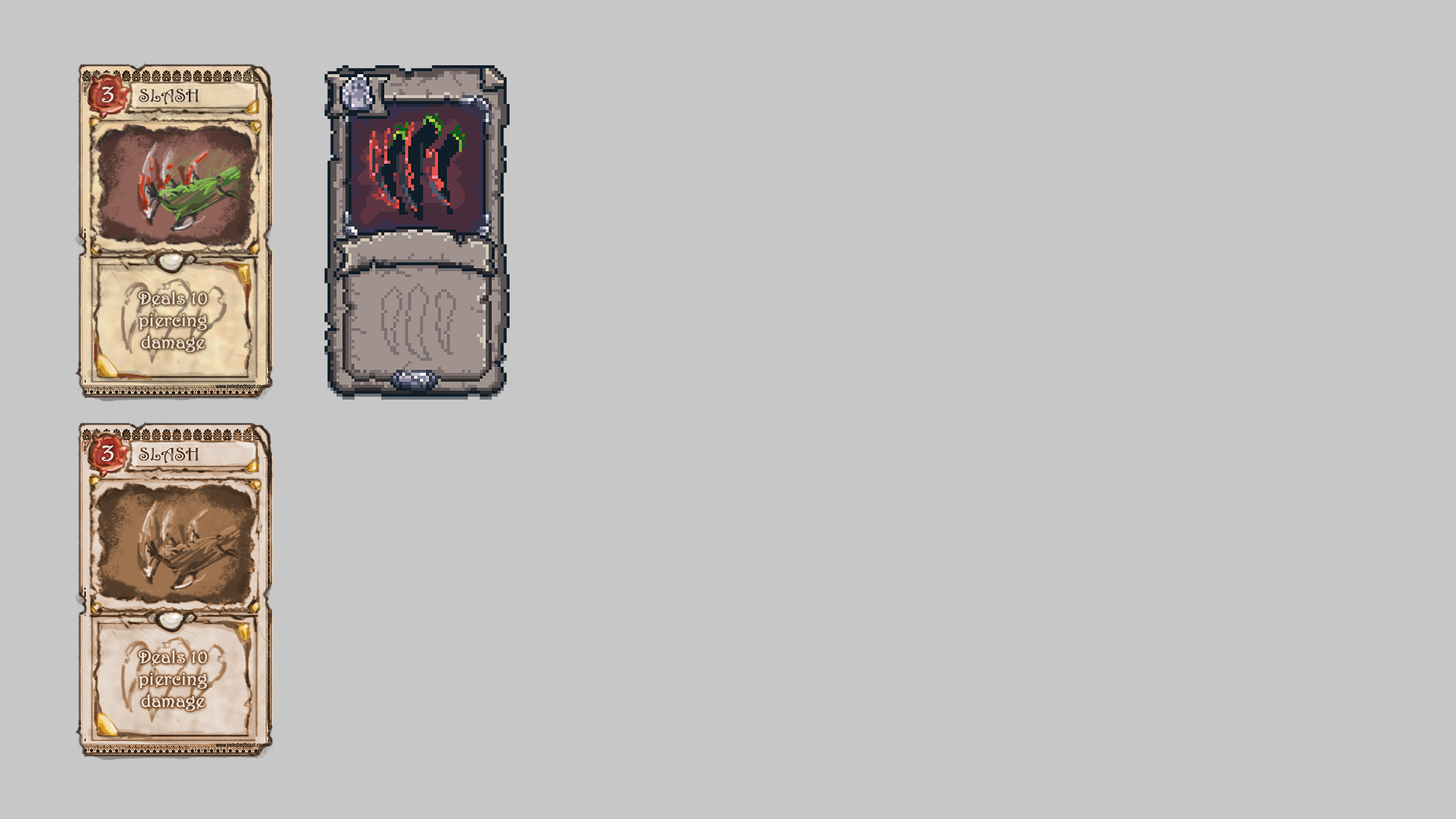
<style>
.page{position:relative;width:1456px;height:819px;background:#c7c7c7}
.page>*{position:absolute;margin:0}
.t1{font:24.3px "Harrington";color:#efe6d9;font-weight:bold}
.t2{font:18.2px "Harrington";color:#37251a;font-weight:bold}
.t3{font:18.2px "Harrington";color:#efe6d9;font-weight:bold}
</style>
<div class="page">
<p class="t1" style="left:102px;top:86px;width:12px;height:16px">3</p>
<p class="t2" style="left:139px;top:89px;width:60px;height:16px">SLASH</p>
<p class="t3" style="left:138px;top:291px;width:69px;height:62px;text-align:center">Deals 10 piercing damage</p>
<p class="t1" style="left:102px;top:445px;width:12px;height:16px">3</p>
<p class="t2" style="left:139px;top:447px;width:60px;height:16px">SLASH</p>
<p class="t3" style="left:138px;top:650px;width:69px;height:61px;text-align:center">Deals 10 piercing damage</p>
</div>
